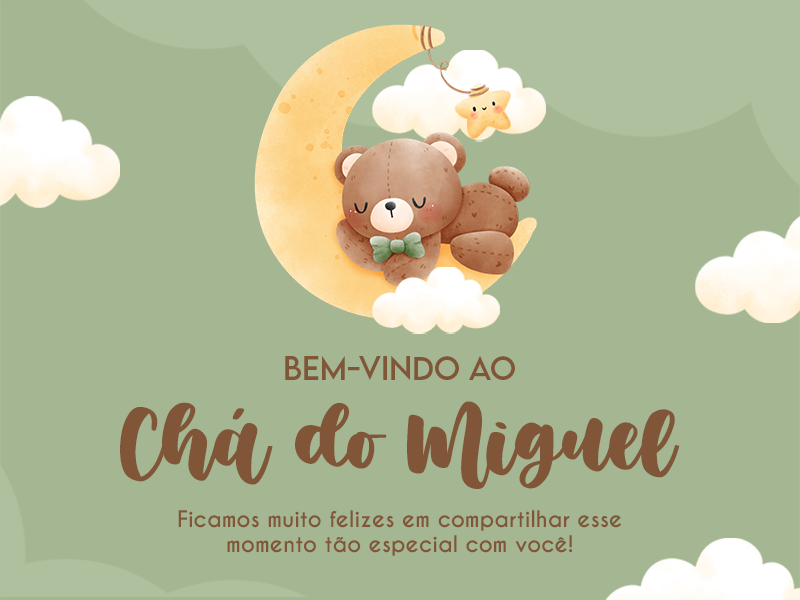
<style>
.page{position:relative;width:800px;height:600px;background:#a4b792}
.page>*{position:absolute;margin:0}
.t1{font:29.6px "LEMONMILK-Regular";color:#805538}
.t2{font:81px "MuthiaraDemoVersion";color:#805538}
.t3{font:21.6px "CaviarDreams-Bold";color:#805538}
</style>
<div class="page">
<p class="t1" style="left:285px;top:355px;width:230px;height:25px">Bem-vindo ao</p>
<p class="t2" style="left:120px;top:401px;width:560px;height:88px">Chá do Miguel</p>
<p class="t3" style="left:178px;top:510px;width:444px;height:46px;text-align:center">Ficamos muito felizes em compartilhar esse<br>momento tão especial com você!</p>
</div>
